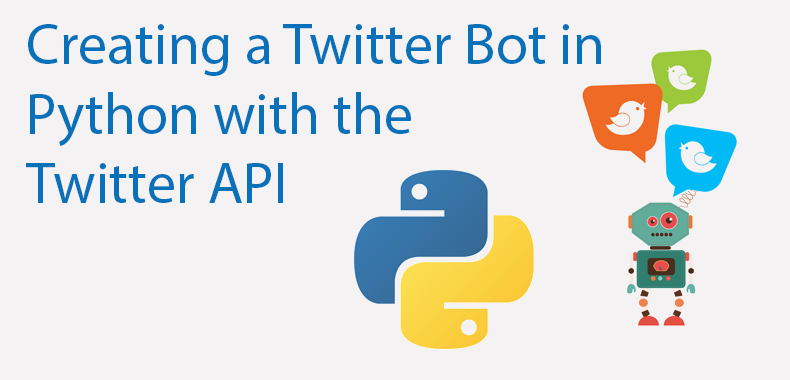
<style>
.page{position:relative;width:790px;height:380px;background:#f4f2f3}
.page>*{position:absolute;margin:0}
.t1{font:58.1px "MyriadPro-Regular";color:#0871b9}
</style>
<div class="page">
<p class="t1" style="left:26px;top:24px;width:575px;height:179px">Creating a Twitter Bot in <br>Python with the <br>Twitter API</p>
</div>
